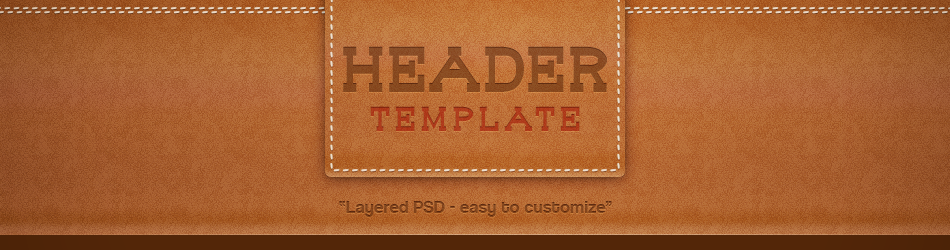
<style>
.page{position:relative;width:950px;height:250px}
.page>*{position:absolute;margin:0}
.t1{font:64.4px "BouWestern";color:#8a4b22}
.t2{font:34.4px "BouWestern";letter-spacing:0.1em;color:#af3a1b}
.t3{font:18px "CoolveticaRg-Regular";letter-spacing:0.02em;color:#82431a}
</style>
<div class="page">
<p class="t1" style="left:343px;top:46px;width:264px;height:46px">HEADER</p>
<p class="t2" style="left:370px;top:106px;width:210px;height:25px">TEMPLATE</p>
<p class="t3" style="left:339px;top:201px;width:273px;height:16px">“Layered PSD - easy to customize”</p>
</div>
